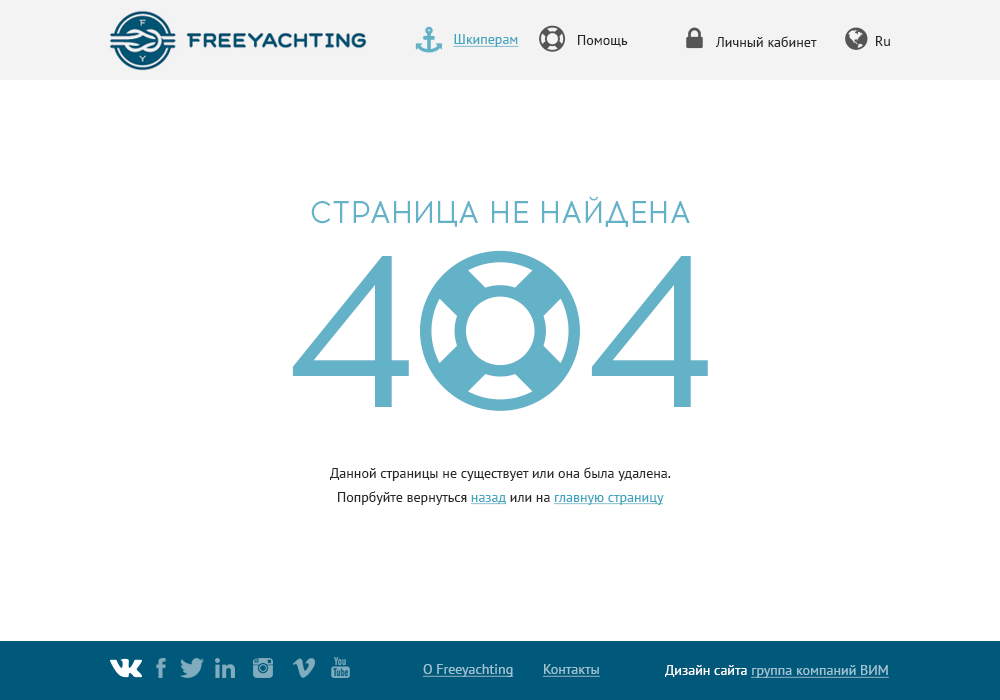
<style>
.page{position:relative;width:1000px;height:700px;background:#ffffff}
.page>*{position:absolute;margin:0}
.t1{font:30px "Acrom-Regular";color:#64b2c7;text-transform:uppercase}
.t2{font:216px "Acrom-Regular";letter-spacing:0.04em;color:#64b2c7;text-transform:uppercase}
.t3{font:14px "PTSans-Regular";color:#282828}
.t4{font:14px "PTSans-Regular";color:#3fa5be;text-decoration:underline}
</style>
<div class="page">
<p class="t1" style="left:311px;top:196px;width:379px;height:31px">Страница не найдена</p>
<p class="t2" style="left:292px;top:256px;width:416px;height:151px">4  4</p>
<p class="t3" style="left:330px;top:467px;width:341px;height:14px">Данной страницы не существует или она была удалена.</p>
<p class="t3" style="left:338px;top:491px;width:326px;height:14px">Попрбуйте вернуться <span class="t4">назад</span> или на <span class="t4">главную страницу</span></p>
</div>
